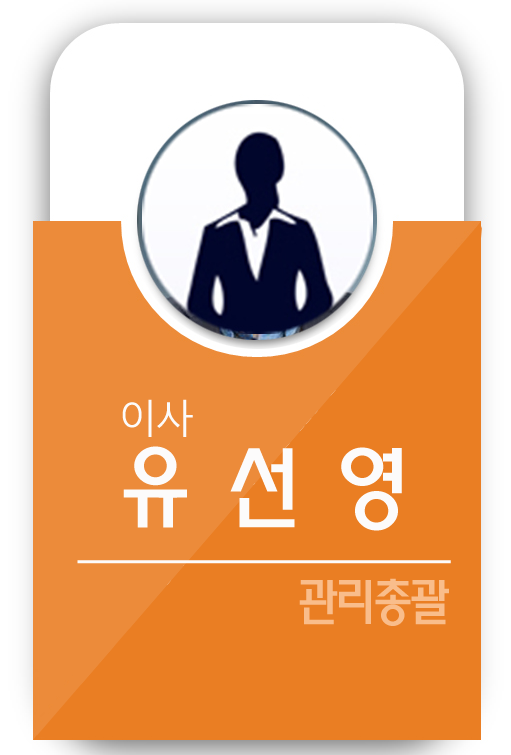
<style>
.page{position:relative;width:511px;height:755px;background:#ea7e23}
.page>*{position:absolute;margin:0}
.t1{font:89.6px/89.6px "MoeumTR-HM";letter-spacing:-0.075em;color:#fcfbfb}
.t2{font:39.6px/47.9px "MalgunGothicRegular";letter-spacing:-0.075em;color:#fcfbfb}
.t3{font:39.6px/89.6px "MalgunGothicRegular";letter-spacing:-0.075em;color:#fcfbfb}
.t4{font:39.6px "HeadlineR-HM";letter-spacing:-0.075em;color:#fcfbfb}
.t5{font:50px "MoeumTR-HM";letter-spacing:-0.075em;color:#f9bd8b}
</style>
<div class="page">
<p class="t1" style="left:122px;top:399px;width:280px;height:132px"><span class="t2">이</span><span class="t3">사<br></span>유 선 영</p>
<p class="t4" style="left:77px;top:560px;width:374px;height:4px">______________________</p>
<p class="t5" style="left:299px;top:578px;width:150px;height:48px">관리총괄</p>
</div>
